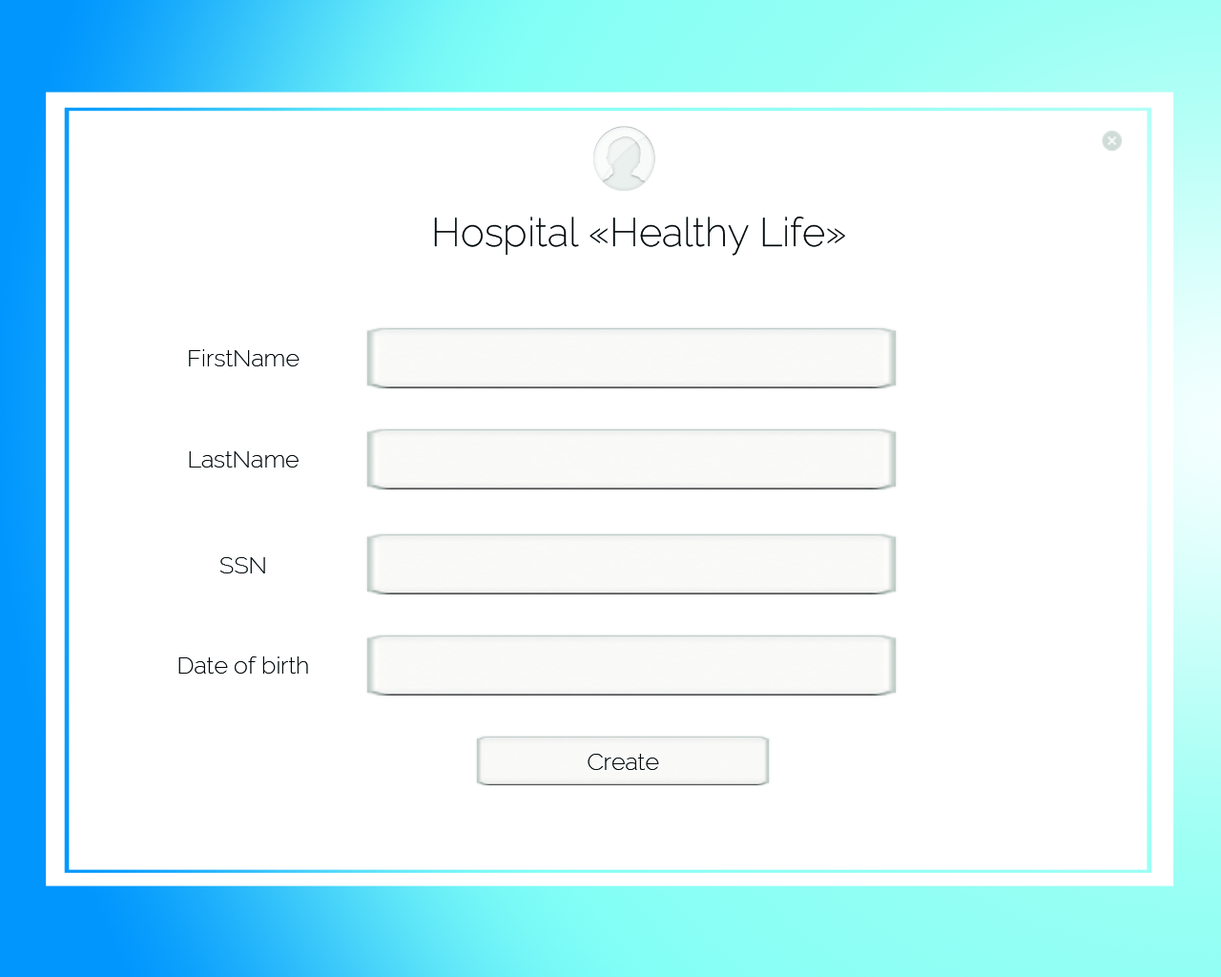
<style>
.page{position:relative;width:1221px;height:977px;background:#ffffff}
.page>*{position:absolute;margin:0}
.t1{font:39.7px "Raleway-ExtraLight";color:#050708}
.t2{font:23.8px "Raleway-ExtraLight";color:#050708}
</style>
<div class="page">
<p class="t1" style="left:434px;top:216px;width:411px;height:40px">Hospital «Healthy Life»</p>
<p class="t2" style="left:189px;top:349px;width:110px;height:17px">FirstName</p>
<p class="t2" style="left:189px;top:451px;width:110px;height:16px">LastName</p>
<p class="t2" style="left:219px;top:557px;width:46px;height:16px">SSN</p>
<p class="t2" style="left:178px;top:656px;width:130px;height:17px">Date of birth</p>
<p class="t2" style="left:588px;top:754px;width:71px;height:16px">Create</p>
</div>
